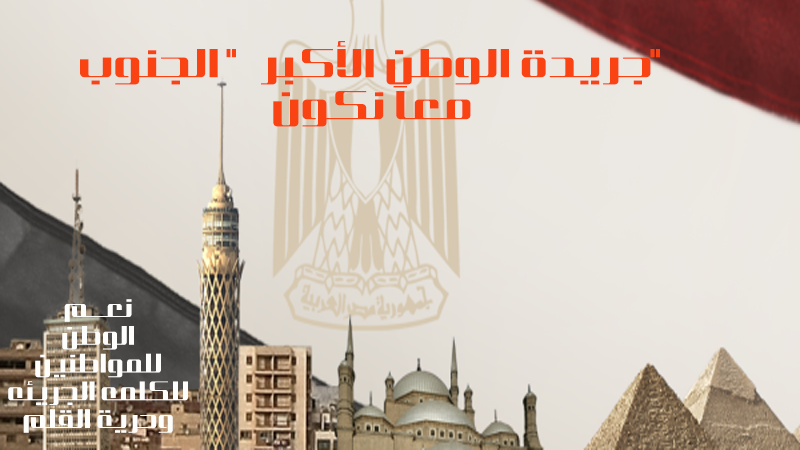
<style>
.page{position:relative;width:800px;height:450px}
.page>*{position:absolute;margin:0}
.t1{font:35px "AraESTaqniya-Regular";color:#f94312}
.t2{font:23.1px "AraESTaqniya-Regular";color:#fdfdfc;scale:0.88 1}
</style>
<div class="page">
<p class="t1" style="left:80px;top:41px;width:580px;height:86px;text-align:center">جريدة الوطن الأكبر  " الجنوب"   <br>معاً نكون</p>
<p class="t2" style="left:8px;top:299px;width:180px;height:134px;text-align:center">نعـــــــم                                        الوطن للمواطنين                            للكلمه الجريئه وحرية القلم</p>
</div>
